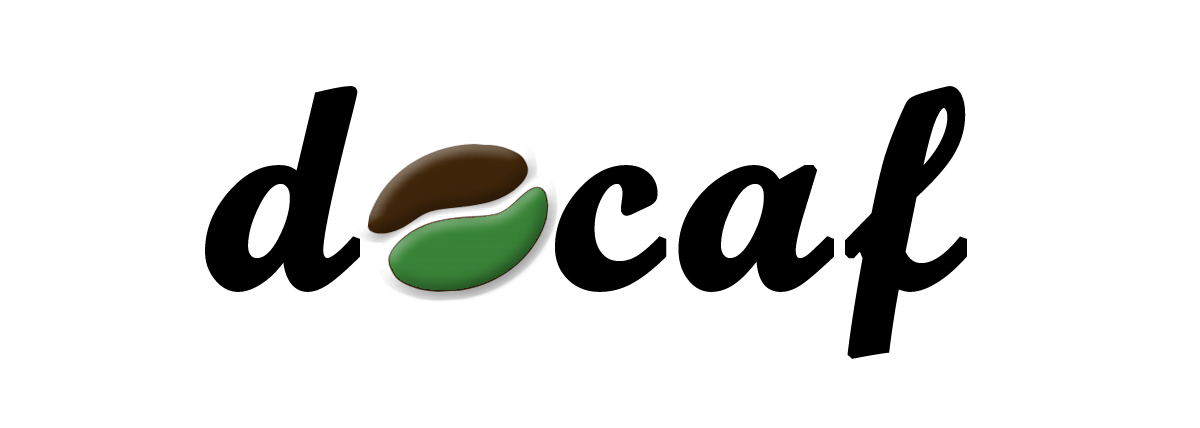
<style>
.page{position:relative;width:1200px;height:428px;background:#ffffff}
.page>*{position:absolute;margin:0}
.t1{font:280px "ScriptMTBold";letter-spacing:0.05em;color:#000000;font-weight:bold}
</style>
<div class="page">
<p class="t1" style="left:205px;top:86px;width:762px;height:273px">d  caf</p>
</div>
